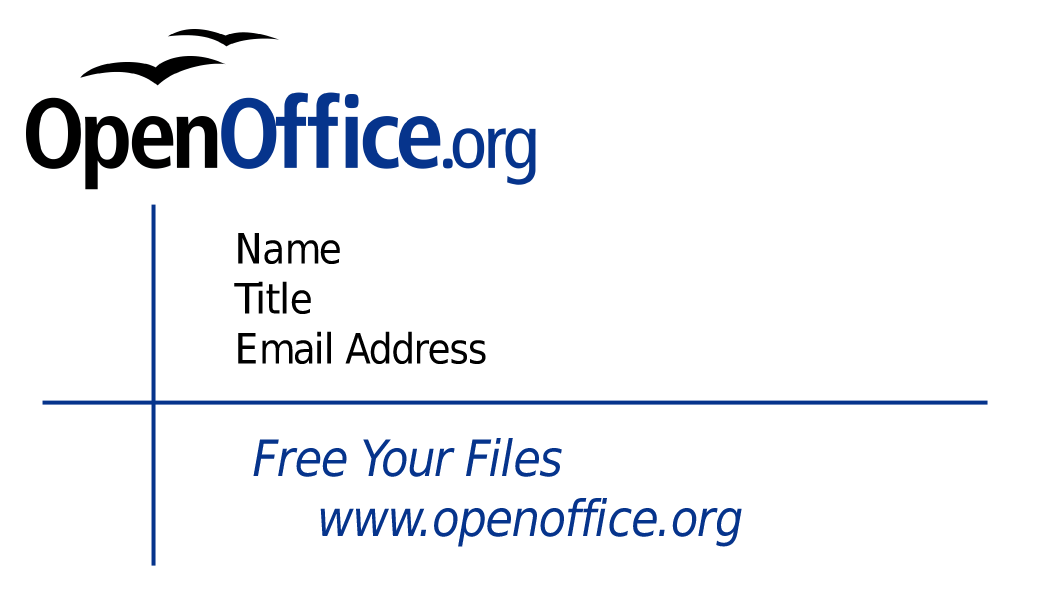
<style>
.page{position:relative;width:1050px;height:600px;background:#ffffff}
.page>*{position:absolute;margin:0}
.t1{font:41.7px "TogaSans-Roman";color:#000000}
.t2{font:50px "TogaSans-Oblique";color:#06348c}
</style>
<div class="page">
<p class="t1" style="left:234px;top:233px;width:252px;height:131px">Name<br>Title<br>Email Address</p>
<p class="t2" style="left:253px;top:438px;width:489px;height:109px">Free Your Files<br>     www.openoffice.org</p>
</div>
